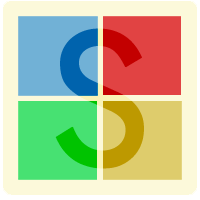
<style>
.page{position:relative;width:200px;height:200px;background:#fcf9da}
.page>*{position:absolute;margin:0}
.t1{font:180px "BellGothicStd-Bold";font-weight:bold}
</style>
<div class="page">
<p class="t1" style="left:55px;top:28px;width:89px;height:141px">S</p>
</div>
